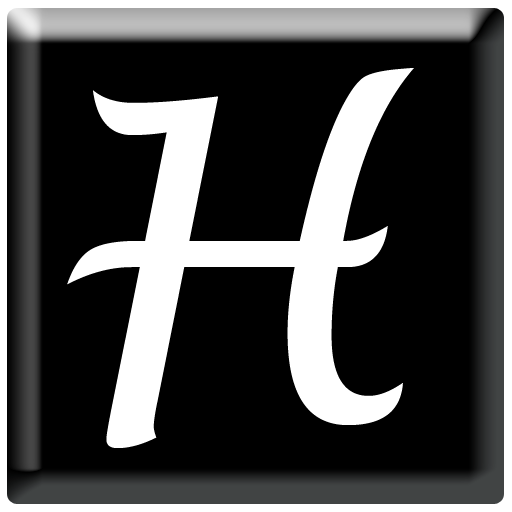
<style>
.page{position:relative;width:512px;height:512px;background:#000000}
.page>*{position:absolute;margin:0}
.t1{font:431px "LucidaHandwriting-Italic";color:#ffffff}
</style>
<div class="page">
<p class="t1" style="left:67px;top:68px;width:347px;height:380px">H</p>
</div>
